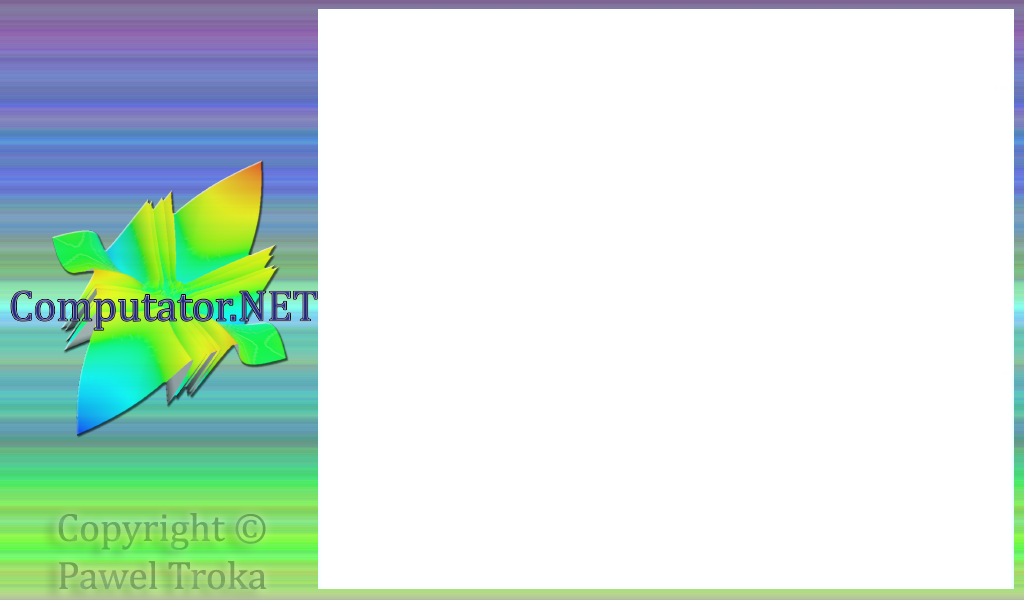
<style>
.page{position:relative;width:1024px;height:600px;background:#ffffff}
.page>*{position:absolute;margin:0}
.t1{font:40px "Cambria";color:#70ab5b}
</style>
<div class="page">
<p class="t1" style="left:58px;top:513px;width:209px;height:77px;text-align:center">Copyright ©<br>Pawel Troka</p>
</div>
